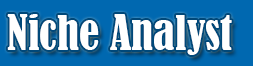
<style>
.page{position:relative;width:253px;height:66px;background:#0068b0}
.page>*{position:absolute;margin:0}
.t1{font:45px "BernardMT-Condensed";color:#ffffff}
</style>
<div class="page">
<p class="t1" style="left:7px;top:14px;width:225px;height:41px">Niche Analyst</p>
</div>
